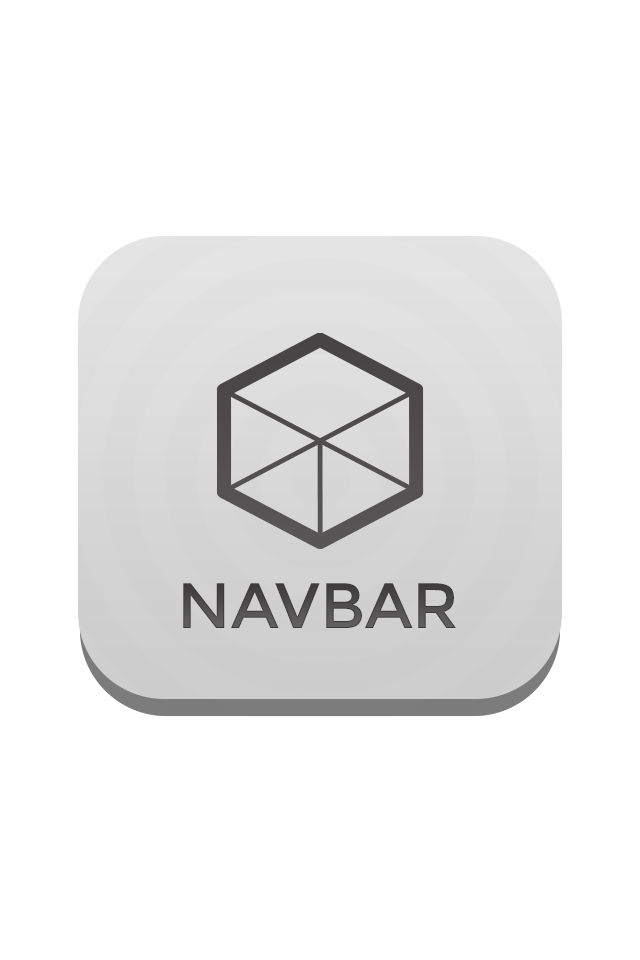
<style>
.page{position:relative;width:640px;height:960px;background:#ffffff}
.page>*{position:absolute;margin:0}
.t1{font:64px "Montserrat-Regular";color:#4d4a4b}
</style>
<div class="page">
<p class="t1" style="left:183px;top:583px;width:273px;height:45px">NAVBAR</p>
</div>
